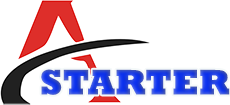
<style>
.page{position:relative;width:230px;height:105px;background:#ffffff}
.page>*{position:absolute;margin:0}
.t1{font:36px "Rockwell-ExtraBold"}
</style>
<div class="page">
<p class="t1" style="left:41px;top:69px;width:189px;height:26px">STARTER</p>
</div>
